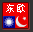
<style>
.page{position:relative;width:33px;height:32px;background:#333333}
.page>*{position:absolute;margin:0}
.t1{font:10.4px "SimSun";color:#ffffff}
</style>
<div class="page">
<p class="t1" style="left:6px;top:4px;width:19px;height:9px">东欧</p>
</div>
